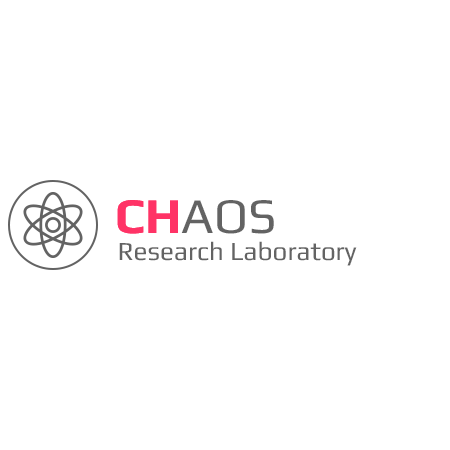
<style>
.page{position:relative;width:450px;height:450px;background:#ffffff}
.page>*{position:absolute;margin:0}
.t1{font:50px "Play"}
.t2{font:50px "Play-Bold"}
.t3{font:50px "Play";color:#636363}
.t4{font:50px "Play-Bold";color:#ff3366}
.t5{font:26px "Play";color:#636363}
</style>
<div class="page">
<p class="t1" style="left:117px;top:200px;width:157px;height:34px"><span class="t2">CH</span>AOS</p>
<p class="t3" style="left:117px;top:200px;width:157px;height:34px"><span class="t4">CH</span>AOS</p>
<p class="t5" style="left:119px;top:241px;width:238px;height:25px">Research Laboratory</p>
<p class="t5" style="left:119px;top:241px;width:238px;height:25px">Research Laboratory</p>
</div>
